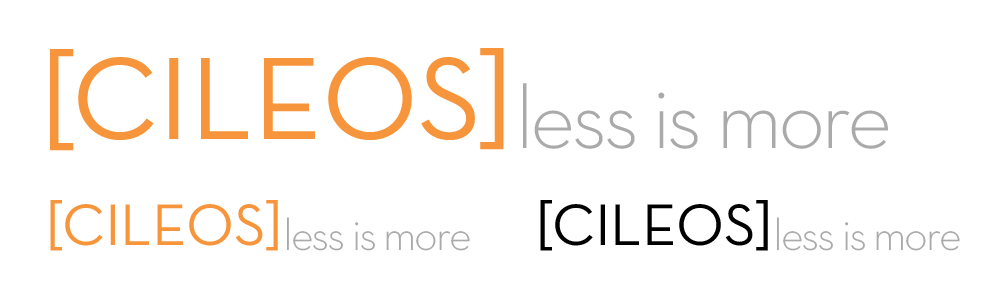
<style>
.page{position:relative;width:1000px;height:300px;background:#ffffff}
.page>*{position:absolute;margin:0}
.t1{font:119px "NeutraText-Book";color:#f7953c}
.t2{font:89.8px "NeutraText-Light";letter-spacing:-0.05em;color:#aaaaaa}
.t3{font:59.5px "NeutraText-Book";color:#f7953c}
.t4{font:59.5px "NeutraText-Book";color:#000000}
.t5{font:44.9px "NeutraText-Light";letter-spacing:-0.05em;color:#aaaaaa}
</style>
<div class="page">
<p class="t1" style="left:50px;top:49px;width:24px;height:102px">[</p>
<p class="t1" style="left:480px;top:48px;width:24px;height:102px">]</p>
<p class="t1" style="left:78px;top:57px;width:397px;height:83px">CILEOS</p>
<p class="t2" style="left:523px;top:83px;width:365px;height:66px">less is more</p>
<p class="t3" style="left:50px;top:200px;width:12px;height:51px">[</p>
<p class="t3" style="left:65px;top:204px;width:198px;height:42px">CILEOS</p>
<p class="t3" style="left:266px;top:200px;width:12px;height:51px">]</p>
<p class="t4" style="left:540px;top:200px;width:12px;height:51px">[</p>
<p class="t4" style="left:555px;top:204px;width:198px;height:42px">CILEOS</p>
<p class="t4" style="left:756px;top:200px;width:12px;height:51px">]</p>
<p class="t5" style="left:287px;top:217px;width:183px;height:34px">less is more</p>
<p class="t5" style="left:777px;top:217px;width:183px;height:34px">less is more</p>
</div>
